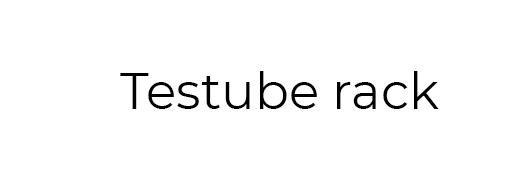
<style>
.page{position:relative;width:507px;height:180px;background:#ffffff}
.page>*{position:absolute;margin:0}
.t1{font:50px "Montserrat-Regular";color:#000000}
</style>
<div class="page">
<p class="t1" style="left:120px;top:71px;width:319px;height:38px">Testube rack</p>
</div>
